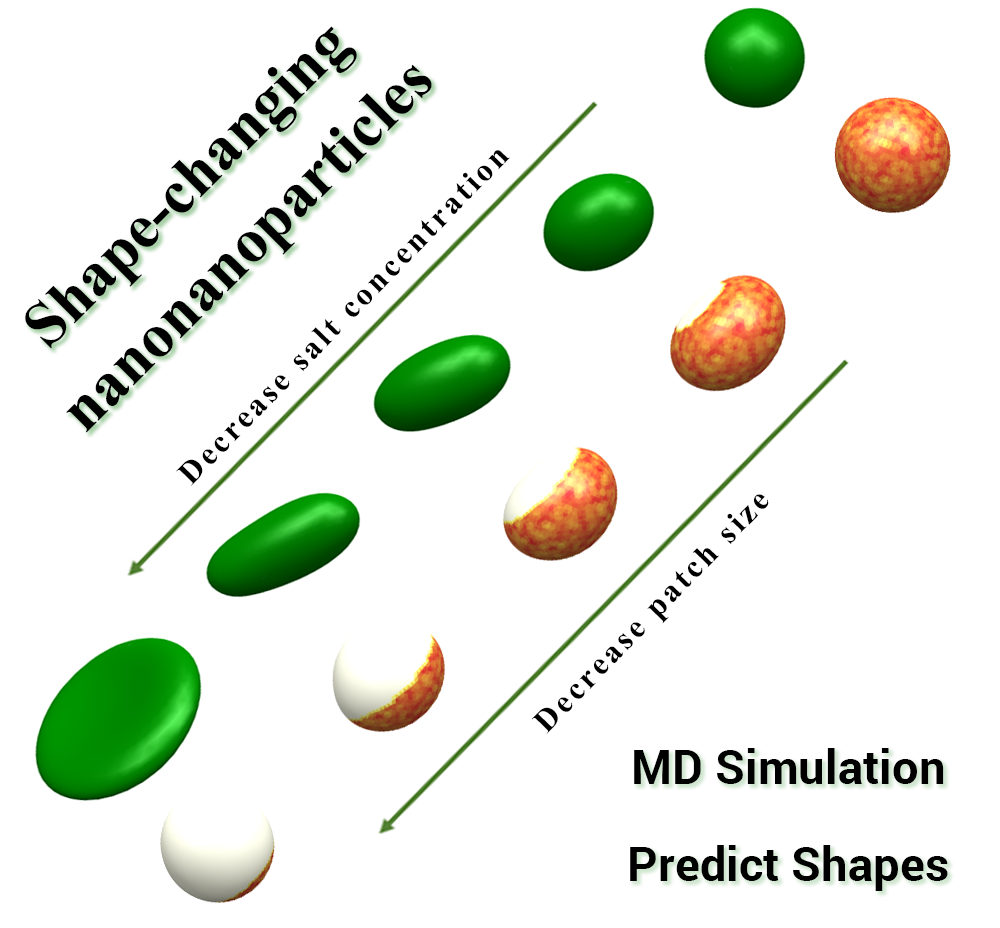
<style>
.page{position:relative;width:1000px;height:928px;background:#ffffff}
.page>*{position:absolute;margin:0}
.t1{font:108px/86px "TimesNewRomanPS-BoldMT";color:#000000}
.t2{font:55px "TimesNewRomanPS-BoldMT";letter-spacing:0.1em;color:#000000}
.t3{font:80.9px "Roboto-Bold";color:#000000}
</style>
<div class="page">
<p class="t1" style="left:25px;top:26px;width:407px;height:407px;text-align:center;rotate:-45deg">Shape-changing <br>nanonanoparticles</p>
<p class="t2" style="left:176px;top:150px;width:334px;height:336px;rotate:-46deg">Decrease salt concentration</p>
<p class="t2" style="left:531px;top:494px;width:238px;height:240px;rotate:-46deg">Decrease patch size</p>
<p class="t3" style="left:630px;top:748px;width:318px;height:143px;text-align:center">MD Simulation<br>Predict Shapes</p>
</div>
